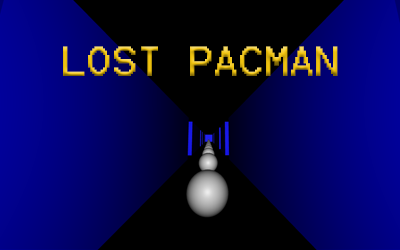
<style>
.page{position:relative;width:400px;height:250px;background:#000000}
.page>*{position:absolute;margin:0}
.t1{font:33.8px "Terminal"}
</style>
<div class="page">
<p class="t1" style="left:63px;top:46px;width:275px;height:30px">LOST PACMAN</p>
</div>
